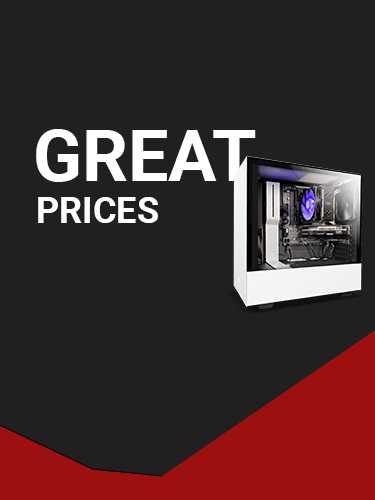
<style>
.page{position:relative;width:375px;height:500px;background:#202020}
.page>*{position:absolute;margin:0}
.t1{font:72px "Roboto-Bold";color:#ffffff}
.t2{font:36px "Roboto-Bold";color:#ffffff}
</style>
<div class="page">
<p class="t1" style="left:36px;top:129px;width:220px;height:53px">GREAT</p>
<p class="t2" style="left:38px;top:197px;width:120px;height:26px">PRICES</p>
</div>
